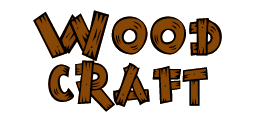
<style>
.page{position:relative;width:256px;height:120px;background:#ffffff}
.page>*{position:absolute;margin:0}
.t1{font:78px/49px "BurnstownDam-Regular";color:#000000}
</style>
<div class="page">
<p class="t1" style="left:33px;top:10px;width:189px;height:102px;text-align:center">Wood<br>craft</p>
</div>
